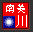
<style>
.page{position:relative;width:33px;height:32px;background:#f20000}
.page>*{position:absolute;margin:0}
.t1{font:10.4px "SimSun";color:#ffffff}
.t2{font:11.7px "SimSun";color:#ffffff}
</style>
<div class="page">
<p class="t1" style="left:6px;top:4px;width:19px;height:9px">南美</p>
<p class="t2" style="left:16px;top:15px;width:11px;height:12px">川</p>
</div>
